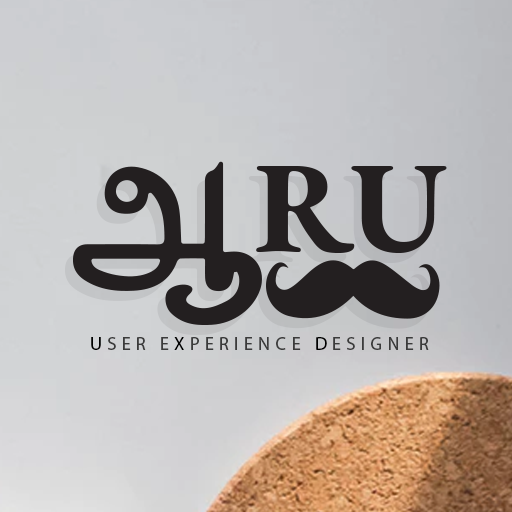
<style>
.page{position:relative;width:512px;height:512px}
.page>*{position:absolute;margin:0}
.t1{font:18px "MyriadPro-Regular";letter-spacing:0.3em;color:#3b3b3b;text-transform:uppercase}
.t2{font:18px "MyriadPro-Regular";letter-spacing:0.3em;color:#000000;text-transform:uppercase}
</style>
<div class="page">
<p class="t1" style="left:91px;top:337px;width:338px;height:13px"><span class="t2">U</span>ser E<span class="t2">x</span>perience <span class="t2">D</span>esigner</p>
</div>
